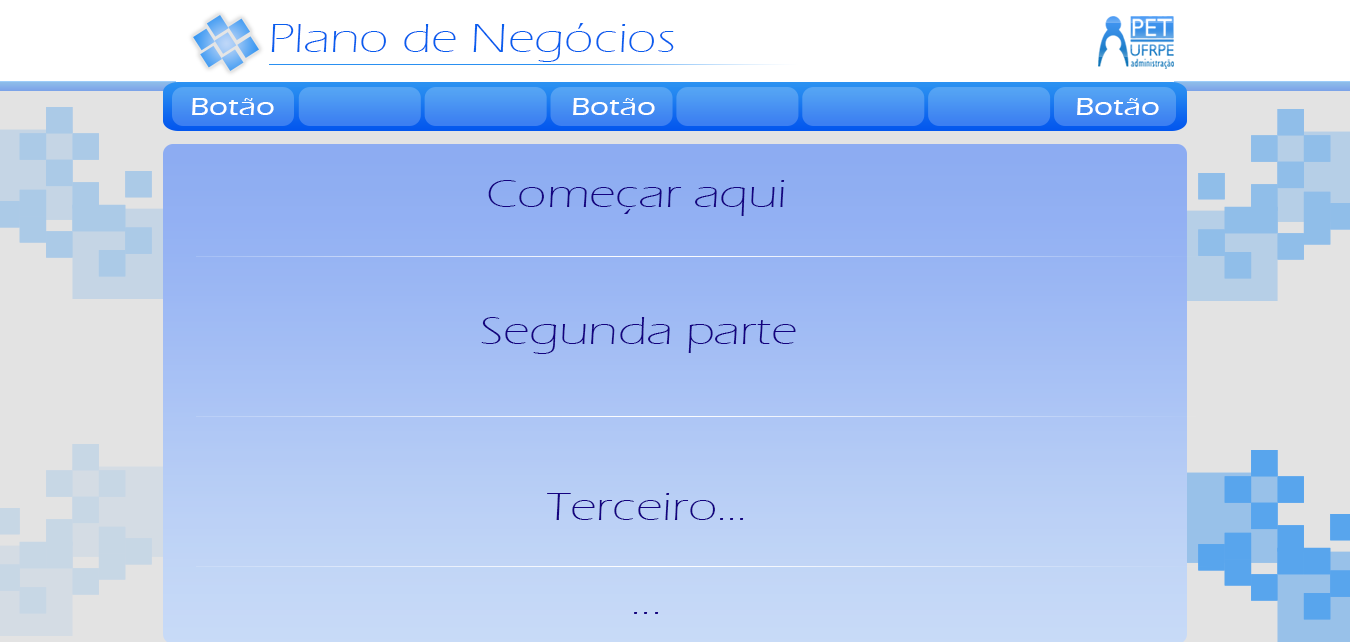
<style>
.page{position:relative;width:1350px;height:642px}
.page>*{position:absolute;margin:0}
.t1{font:42px "ErasITC-Light";color:#085eee;scale:1.24 1}
.t2{font:26px "ErasITC-Medium";color:#ffffff;scale:1.24 1}
.t3{font:41px "ErasITC-Light";color:#140280;scale:1.26 1}
</style>
<div class="page">
<p class="t1" style="left:271px;top:23px;width:403px;height:39px">Plano de Negócios</p>
<p class="t2" style="left:192px;top:98px;width:82px;height:17px">Botão</p>
<p class="t2" style="left:573px;top:98px;width:82px;height:17px">Botão</p>
<p class="t2" style="left:1077px;top:98px;width:82px;height:17px">Botão</p>
<p class="t3" style="left:488px;top:180px;width:297px;height:36px">Começar aqui</p>
<p class="t3" style="left:481px;top:317px;width:315px;height:37px">Segunda parte</p>
<p class="t3" style="left:547px;top:493px;width:197px;height:27px">Terceiro...</p>
<p class="t3" style="left:634px;top:612px;width:25px;height:2px">...</p>
</div>
